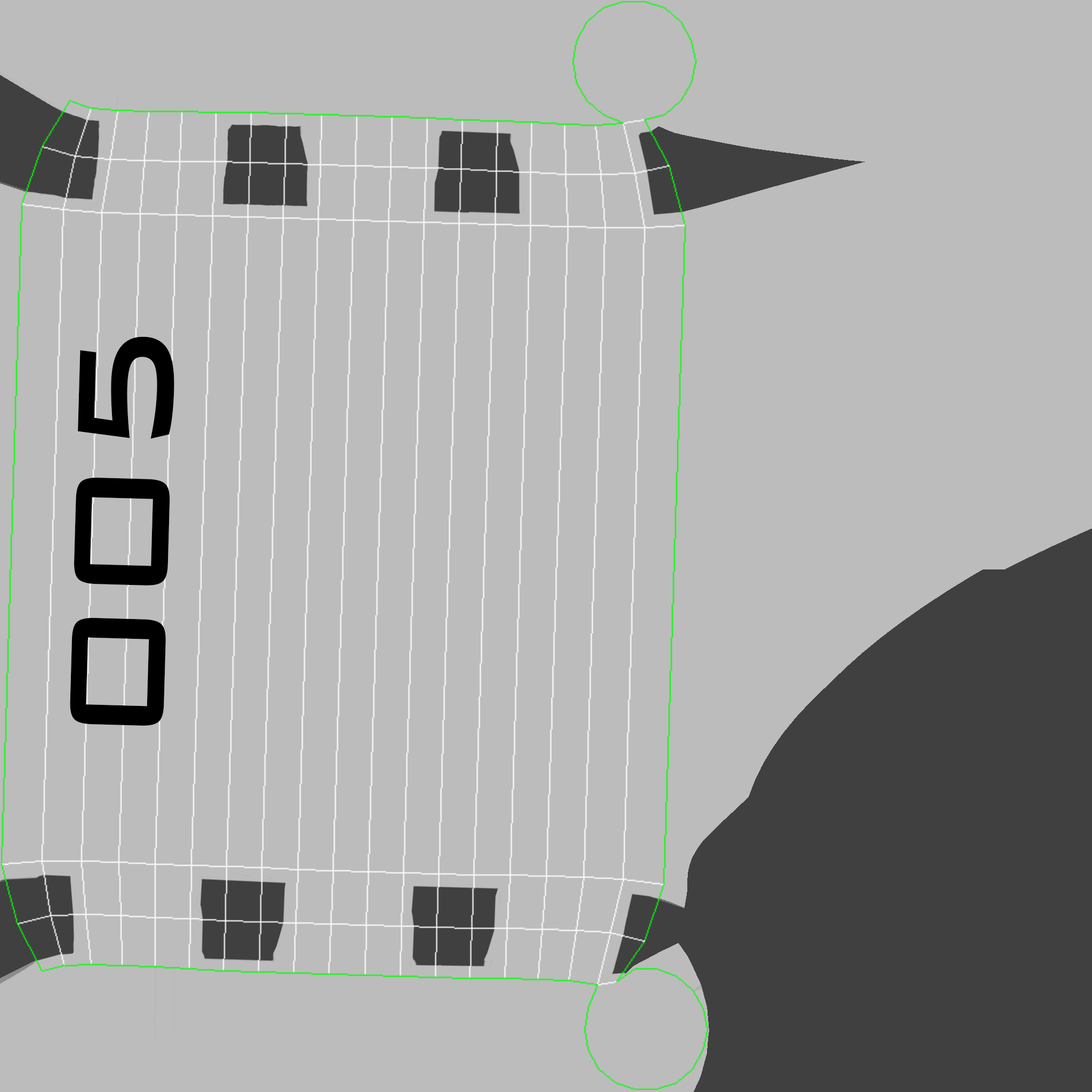
<style>
.page{position:relative;width:1092px;height:1092px;background:#bcbcbc}
.page>*{position:absolute;margin:0}
.t1{font:181.7px "BankGothicBT-Medium";color:#000000}
</style>
<div class="page">
<p class="t1" style="left:70px;top:336px;width:104px;height:390px;rotate:-88deg">005</p>
</div>
